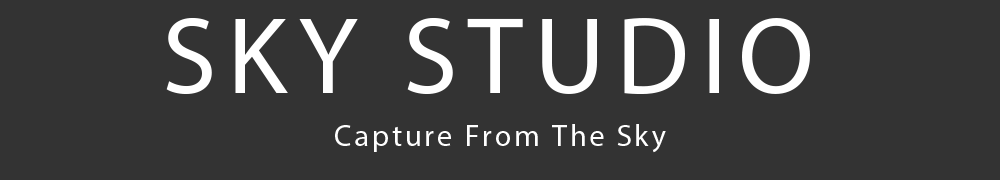
<style>
.page{position:relative;width:1000px;height:180px;background:#333333}
.page>*{position:absolute;margin:0}
.t1{font:110.1px "MyriadPro-Regular";letter-spacing:0.1em;color:#ffffff}
.t2{font:30px "MyriadPro-Regular";letter-spacing:0.1em;color:#ffffff}
</style>
<div class="page">
<p class="t1" style="left:166px;top:17px;width:644px;height:77px">SKY STUDIO</p>
<p class="t2" style="left:335px;top:124px;width:331px;height:29px">Capture From The Sky</p>
</div>
